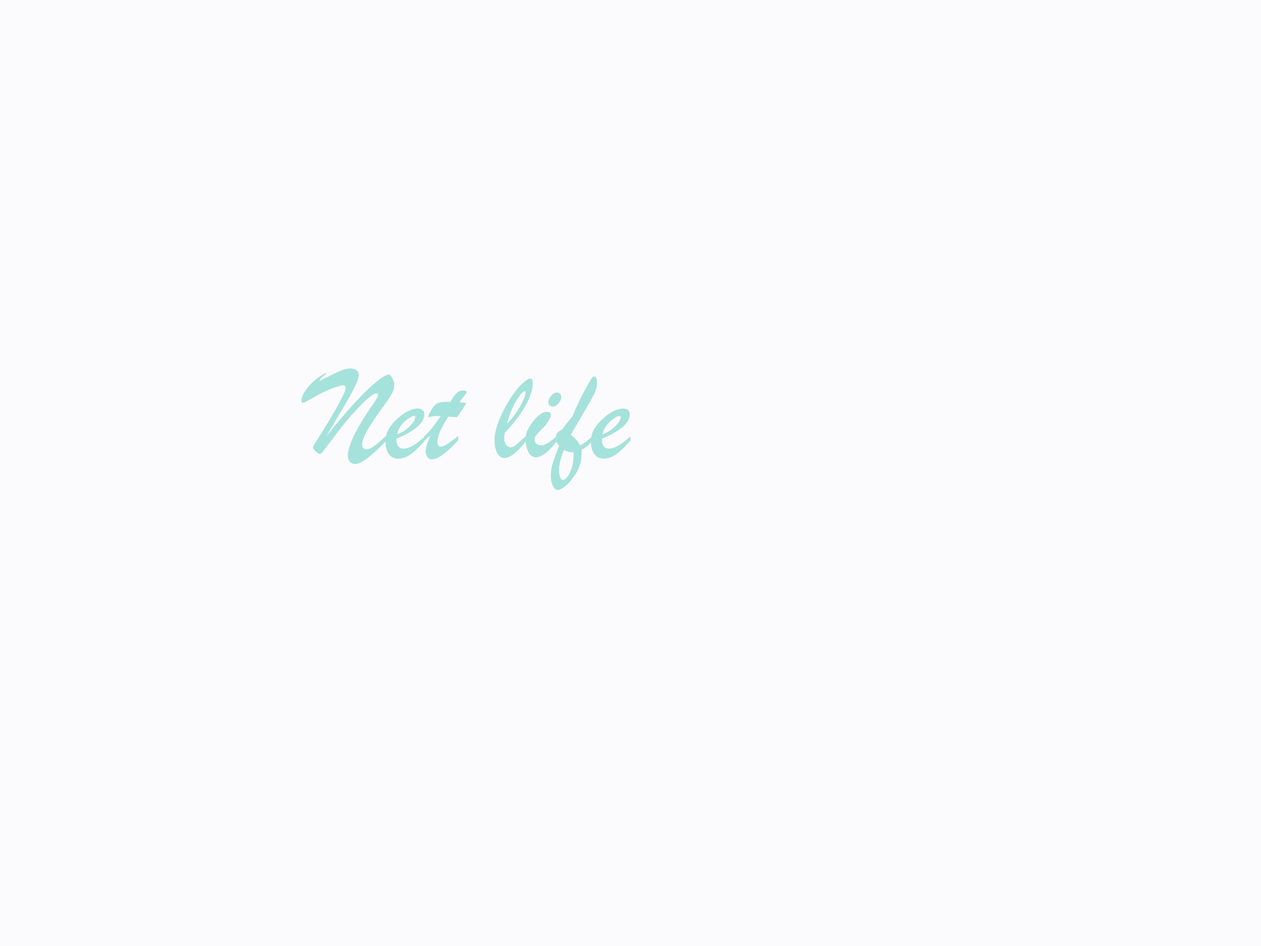
<style>
.page{position:relative;width:1261px;height:946px;background:#fbfafc}
.page>*{position:absolute;margin:0}
.t1{font:133.5px "BrushScriptMT";color:#a5e2db}
.t2{font:133.5px "Algerian";color:#2c16b8}
</style>
<div class="page">
<p class="t1" style="left:301px;top:368px;width:330px;height:122px"><span class="t2"><br></span>Net life</p>
</div>
